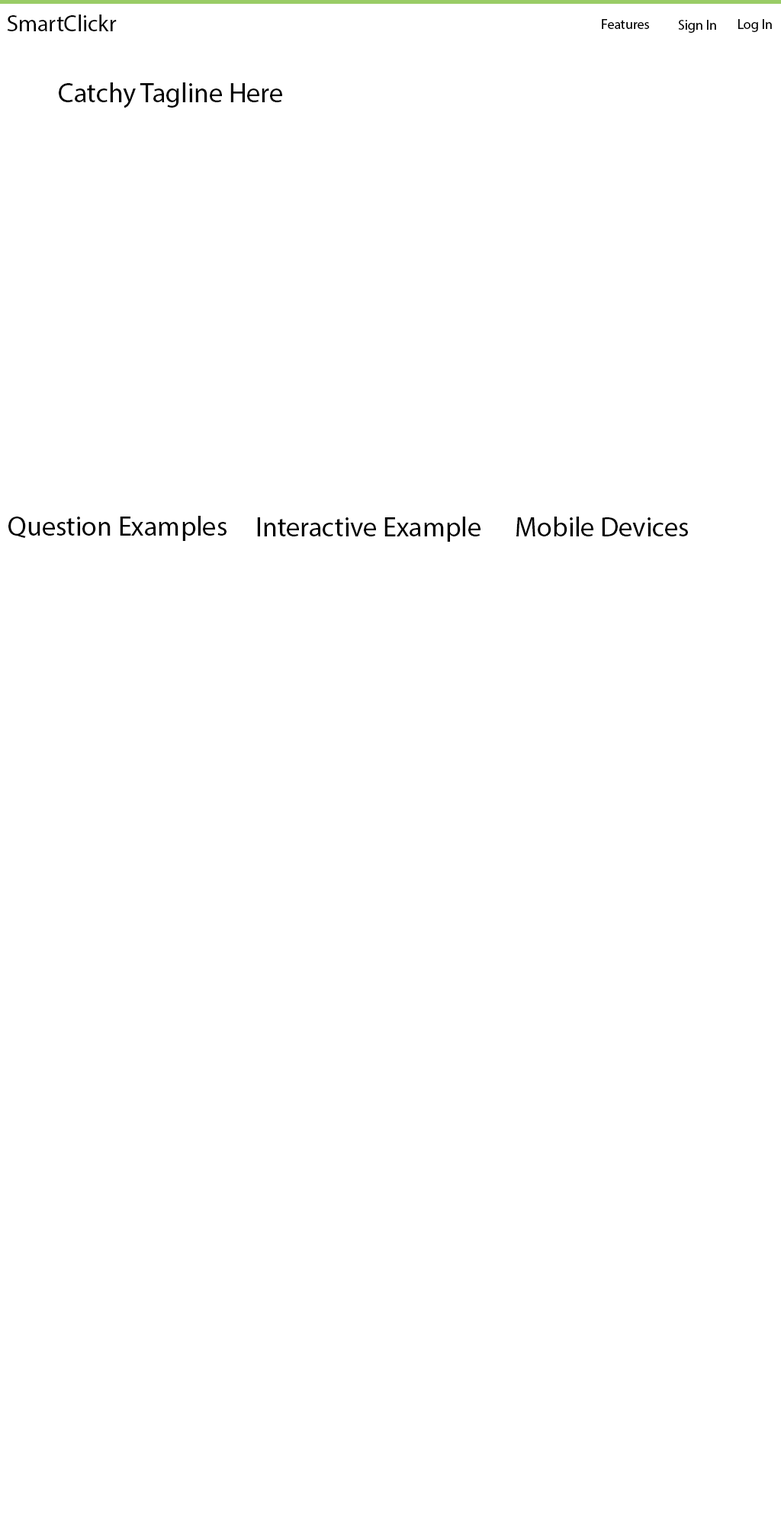
<style>
.page{position:relative;width:781px;height:1526px;background:#ffffff}
.page>*{position:absolute;margin:0}
.t1{font:22.9px "MyriadPro-Regular";color:#000000}
.t2{font:13.7px "MyriadPro-Regular";color:#000000}
.t3{font:27.5px "MyriadPro-Regular";color:#000000}
</style>
<div class="page">
<p class="t1" style="left:7px;top:14px;width:110px;height:17px">SmartClickr</p>
<p class="t2" style="left:602px;top:19px;width:47px;height:10px">Features</p>
<p class="t2" style="left:678px;top:20px;width:39px;height:13px">Sign In</p>
<p class="t2" style="left:739px;top:19px;width:33px;height:13px">Log In</p>
<p class="t3" style="left:59px;top:82px;width:223px;height:26px">Catchy Tagline Here</p>
<p class="t3" style="left:8px;top:516px;width:219px;height:25px">Question Examples</p>
<p class="t3" style="left:257px;top:517px;width:224px;height:25px">Interactive Example</p>
<p class="t3" style="left:517px;top:517px;width:171px;height:19px">Mobile Devices</p>
</div>
